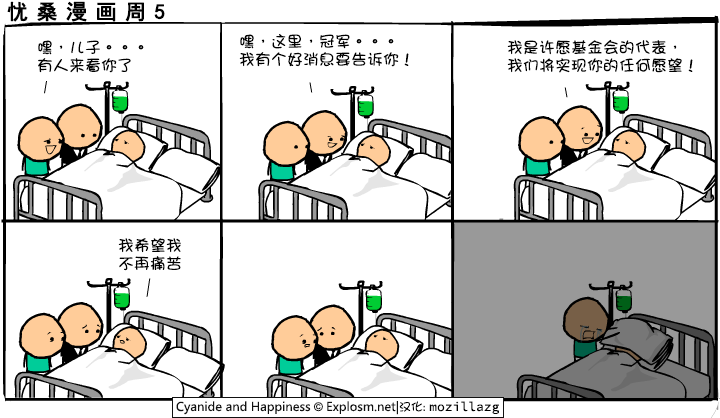
<style>
.page{position:relative;width:720px;height:418px;background:#ffffff}
.page>*{position:absolute;margin:0}
.t1{font:21px "SimHei";letter-spacing:0.38em;color:#000000;font-weight:bold}
.t2{font:16px/18px "DFGirl";color:#000000}
</style>
<div class="page">
<p class="t1" style="left:7px;top:1px;width:158px;height:21px">忧桑漫画周5</p>
<p class="t2" style="left:38px;top:40px;width:106px;height:33px">嘿，儿子。。。<br>有人来看你了</p>
<p class="t2" style="left:239px;top:34px;width:170px;height:33px">嘿，这里，冠军。。。<br>我有个好消息要告诉你！</p>
<p class="t2" style="left:507px;top:39px;width:186px;height:34px">我是许愿基金会的代表，<br>我们将实现你的任何愿望！</p>
<p class="t2" style="left:118px;top:238px;width:63px;height:33px">我希望我<br>不再痛苦</p>
</div>
